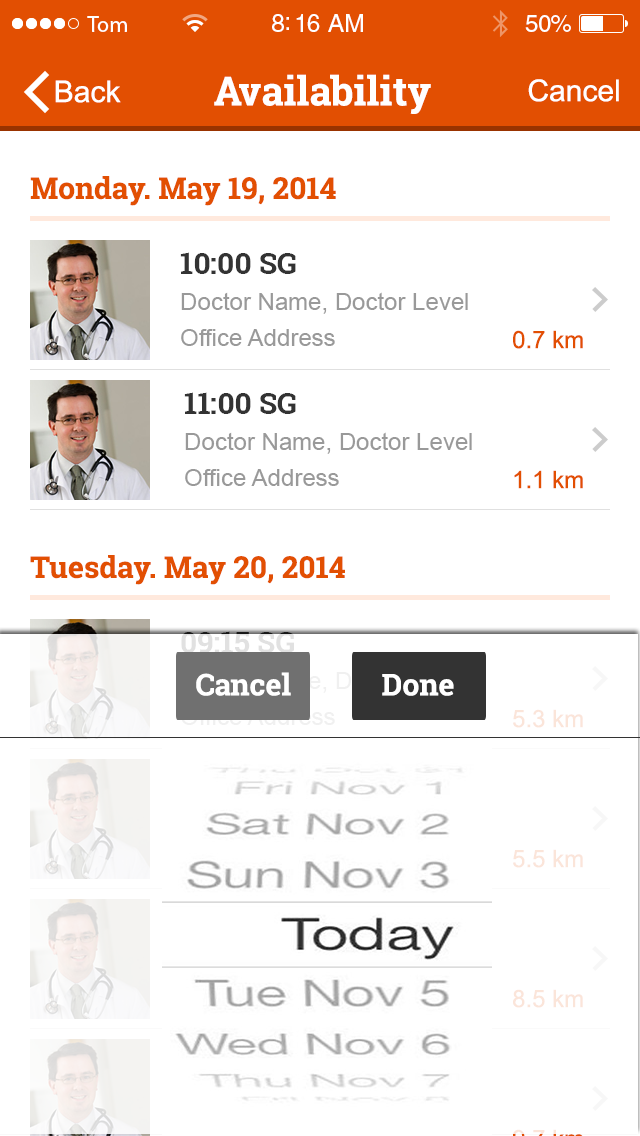
<style>
.page{position:relative;width:640px;height:1136px;background:#ffffff}
.page>*{position:absolute;margin:0}
.t1{font:23px "MyriadPro-Regular";letter-spacing:-0.02em;color:#ffffff}
.t2{font:25px "HelveticaLTStd-Roman";letter-spacing:-0.02em;color:#ffffff}
.t3{font:24px "HelveticaLTStd-Roman";letter-spacing:-0.02em;color:#ffffff}
.t4{font:40px "RobotoSlab-Bold";color:#ffffff}
.t5{font:30px "ArialMT";color:#ffffff}
.t6{font:30px "RobotoSlab-Bold";color:#e24f02}
.t7{font:24px/36px "ArialMT";color:#999999}
.t8{font:30px/36px "RobotoSlab-Bold";color:#333333}
.t9{font:24px "ArialMT";color:#e24f02}
.t10{font:30px "RobotoSlab-Bold";color:#ffffff}
.t11{font:24px "ArialMT";color:#fbe5d9}
</style>
<div class="page">
<p class="t1" style="left:87px;top:16px;width:40px;height:16px">Tom</p>
<p class="t2" style="left:272px;top:14px;width:91px;height:18px">8:16 AM</p>
<p class="t3" style="left:525px;top:15px;width:46px;height:17px">50%</p>
<p class="t4" style="left:214px;top:74px;width:217px;height:40px">Availability</p>
<p class="t5" style="left:55px;top:80px;width:66px;height:23px">Back</p>
<p class="t5" style="left:528px;top:79px;width:91px;height:23px">Cancel</p>
<p class="t6" style="left:30px;top:176px;width:306px;height:30px">Monday. May 19, 2014</p>
<p class="t7" style="left:180px;top:252px;width:288px;height:94px"><span class="t8">10:00 SG<br></span>Doctor Name, Doctor Level<br>Office Address</p>
<p class="t9" style="left:513px;top:330px;width:70px;height:19px">0.7 km</p>
<p class="t7" style="left:184px;top:392px;width:288px;height:94px"><span class="t8">11:00 SG<br></span>Doctor Name, Doctor Level<br>Office Address</p>
<p class="t9" style="left:514px;top:470px;width:69px;height:19px">1.1 km</p>
<p class="t6" style="left:30px;top:555px;width:315px;height:30px">Tuesday. May 20, 2014</p>
<p class="t10" style="left:196px;top:672px;width:95px;height:24px">Cancel</p>
<p class="t10" style="left:382px;top:674px;width:72px;height:22px">Done</p>
<p class="t11" style="left:513px;top:709px;width:70px;height:19px">5.3 km</p>
<p class="t11" style="left:513px;top:849px;width:70px;height:19px">5.5 km</p>
<p class="t11" style="left:513px;top:989px;width:70px;height:19px">8.5 km</p>
</div>
